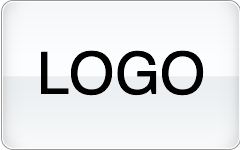
<style>
.page{position:relative;width:240px;height:150px}
.page>*{position:absolute;margin:0}
.t1{font:58px "Helvetica";color:#000000}
</style>
<div class="page">
<p class="t1" style="left:41px;top:50px;width:163px;height:46px">LOGO</p>
</div>
